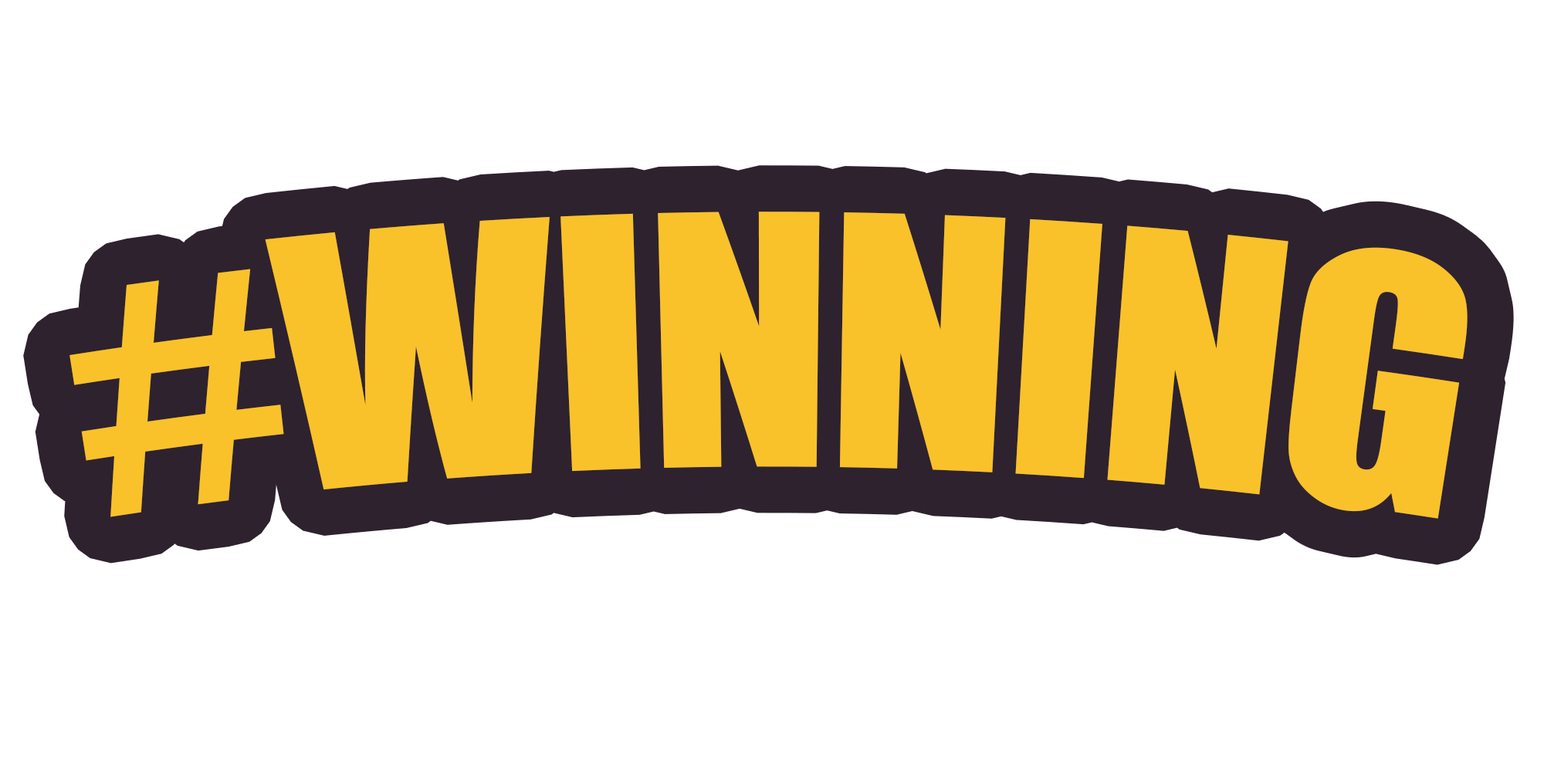
<style>
.page{position:relative;width:1544px;height:772px;background:#ffffff}
.page>*{position:absolute;margin:0}
.t1{font:321.7px "Impact";letter-spacing:-0.01em;color:#f9c22b}
</style>
<div class="page">
<p class="t1" style="left:69px;top:212px;width:1399px;height:307px">#WINNING</p>
</div>
